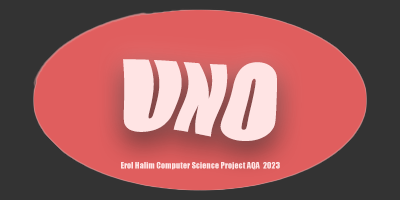
<style>
.page{position:relative;width:400px;height:200px;background:#333333}
.page>*{position:absolute;margin:0}
.t1{font:100px "Impact";color:#ffe4e4}
.t2{font:8.3px "Impact";color:#ffe4e4}
</style>
<div class="page">
<p class="t1" style="left:123px;top:59px;width:154px;height:82px">UNO</p>
<p class="t2" style="left:121px;top:162px;width:159px;height:8px">Erol Halim Computer Science Project AQA  2023</p>
</div>
